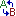
<style>
.page{position:relative;width:16px;height:16px;background:#ffffff}
.page>*{position:absolute;margin:0}
.t1{font:10.7px "SegoeUI";color:#1f772b}
.t2{font:10.7px "SegoeUI";color:#86141c}
</style>
<div class="page">
<p class="t1" style="left:0px;top:0px;width:7px;height:8px">A</p>
<p class="t2" style="left:10px;top:8px;width:5px;height:8px">B</p>
</div>
